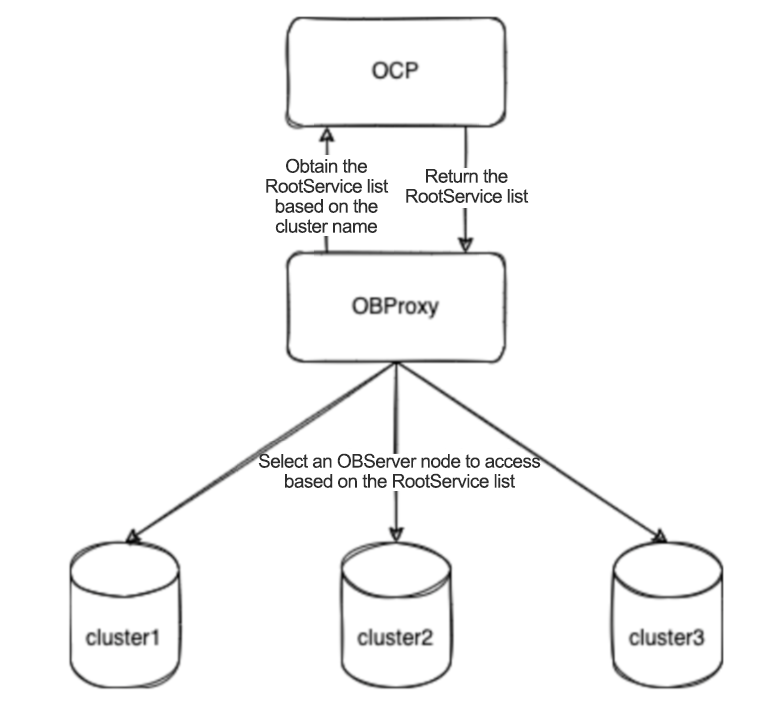
<style>
.page{position:relative;width:778px;height:701px;background:#ffffff}
.page>*{position:absolute;margin:0}
.t1{font:19px/20px "ArialMT";letter-spacing:-0.03em;color:#2e2e2e}
</style>
<div class="page">
<p class="t1" style="left:266px;top:158px;width:123px;height:75px;text-align:center">Obtain the RootService list based on the cluster name</p>
<p class="t1" style="left:406px;top:169px;width:123px;height:34px;text-align:center">Return the RootService list</p>
<p class="t1" style="left:258px;top:453px;width:283px;height:35px;text-align:center">Select an OBServer node to access based on the RootService list</p>
</div>
